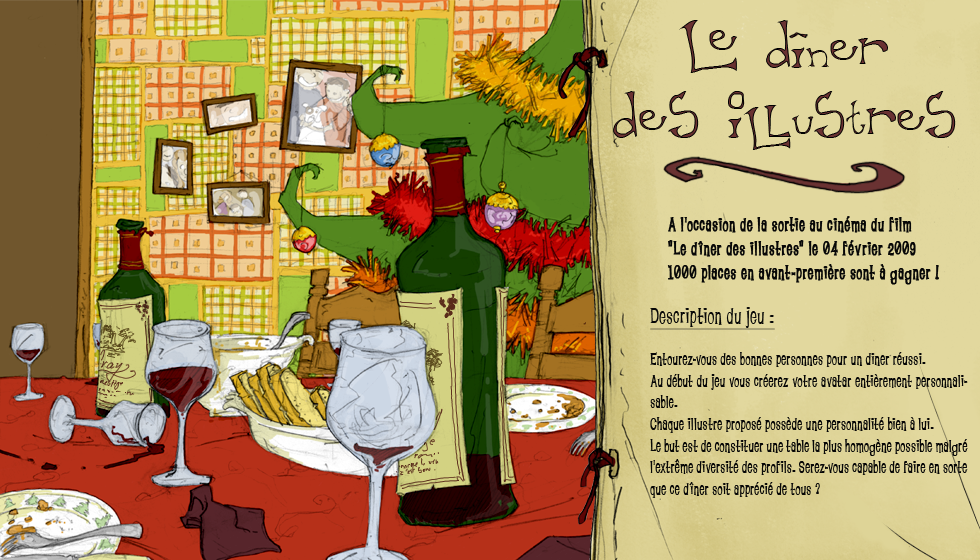
<style>
.page{position:relative;width:980px;height:560px}
.page>*{position:absolute;margin:0}
.t1{font:58.3px "TaxidermistII"}
.t2{font:72px "TaxidermistII"}
.t3{font:20px "LoungeBait";letter-spacing:0.05em;color:#070707;font-weight:bold}
.t4{font:18px "LoungeBait";letter-spacing:0.05em;color:#070707}
.t5{font:24px "LoungeBait";letter-spacing:0.05em;color:#070707;text-decoration:underline}
</style>
<div class="page">
<p class="t1" style="left:613px;top:20px;width:343px;height:130px;text-align:center"><span class="t2">L</span>e diner<br>des iLlustres</p>
<p class="t3" style="left:667px;top:216px;width:272px;height:69px">A l'occasion de la sortie au cinéma du film <br>"Le dîner des illustres" le 04 février 2009<br>1000 places en avant-première sont à gagner !</p>
<p class="t4" style="left:650px;top:307px;width:318px;height:191px"><span class="t3"><br><br></span><span class="t5">Description du jeu :<br><br></span>Entourez-vous des bonnes personnes pour un diner réussi.<br>Au début du jeu vous créerez votre avatar entièrement personnalisable.<br>Chaque illustre proposé possède une personnalité bien à lui. <br>Le but est de constituer une table la plus homogène possible malgré l'extrême diversité des profils. Serez-vous capable de faire en sorte que ce dîner soit apprécié de tous ?</p>
</div>
